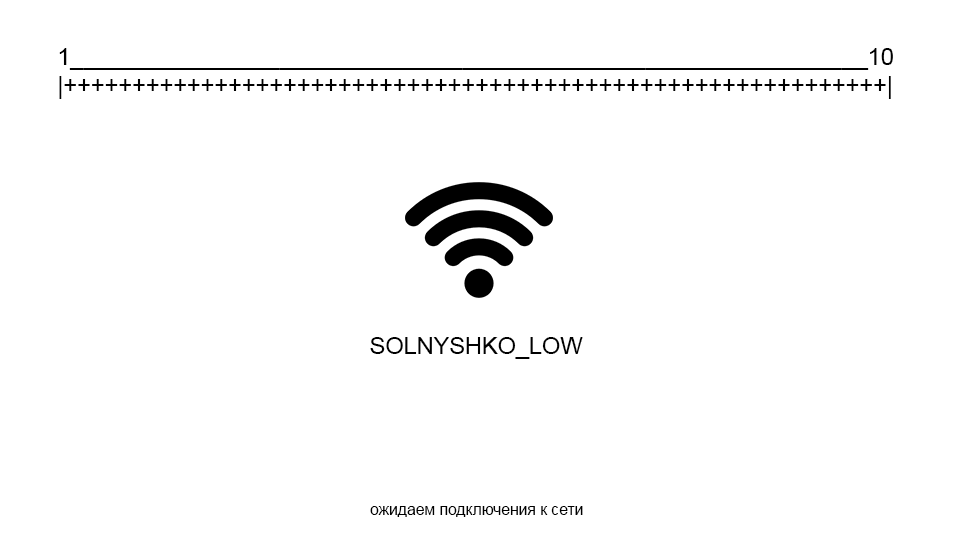
<style>
.page{position:relative;width:960px;height:540px;background:#ffffff}
.page>*{position:absolute;margin:0}
.t1{font:23.5px "ArialMT";color:#000000}
.t2{font:15.7px "ArialMT";color:#000000}
</style>
<div class="page">
<p class="t1" style="left:59px;top:48px;width:834px;height:51px">1_____________________________________________________________10<br>|++++++++++++++++++++++++++++++++++++++++++++++++++++++++++++|</p>
<p class="t1" style="left:370px;top:337px;width:213px;height:22px">SOLNYSHKO_LOW</p>
<p class="t2" style="left:370px;top:506px;width:213px;height:11px">ожидаем подключения к сети</p>
</div>
